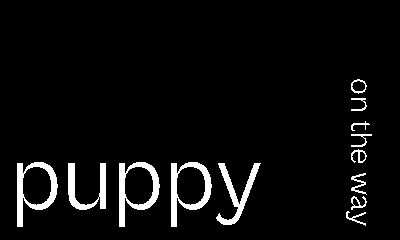
<style>
.page{position:relative;width:400px;height:240px;background:#000000}
.page>*{position:absolute;margin:0}
.t1{font:32px "CabinetGrotesk-Regular";color:#ffffff}
.t2{font:96px "CabinetGrotesk-Regular";color:#ffffff}
</style>
<div class="page">
<p class="t1" style="left:346px;top:79px;width:26px;height:147px;rotate:90deg">on the way</p>
<p class="t2" style="left:17px;top:162px;width:244px;height:65px">puppy</p>
</div>
